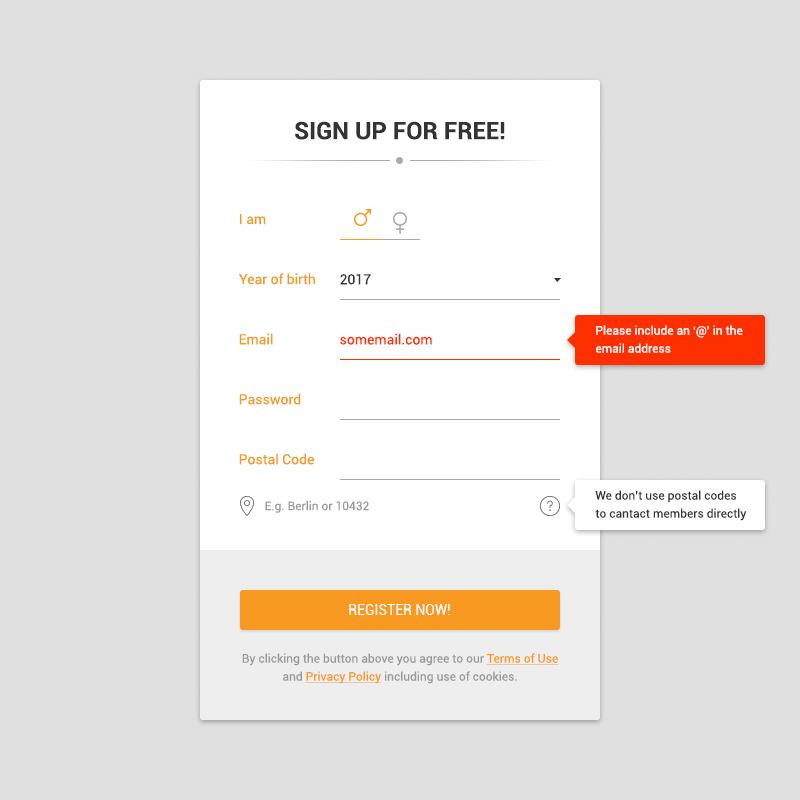
<style>
.page{position:relative;width:800px;height:800px;background:#e0e0e0}
.page>*{position:absolute;margin:0}
.t1{font:24px "Roboto-Bold";color:#333333;text-transform:uppercase}
.t2{font:14.1px "Roboto-Regular";color:#f89921}
.t3{font:14px "Roboto-Regular";color:#f89921}
.t4{font:14px "Roboto-Regular";color:#333333}
.t5{font:12px/18px "Roboto-Regular";color:#ffffff}
.t6{font:13.9px "Roboto-Regular";color:#f89921}
.t7{font:13.9px "Roboto-Regular";color:#ff3000}
.t8{font:12px/18px "Roboto-Regular";color:#333333}
.t9{font:12px "Roboto-Regular";color:#999999}
.t10{font:14px "Roboto-Regular";color:#ffffff;text-transform:uppercase}
.t11{font:12px/18px "Roboto-Regular";color:#999999}
.t12{font:12px/18px "Roboto-Regular";color:#f89921;text-decoration:underline}
</style>
<div class="page">
<p class="t1" style="left:295px;top:121px;width:210px;height:19px">Sign up for FREE!</p>
<p class="t2" style="left:240px;top:214px;width:26px;height:11px">I am</p>
<p class="t3" style="left:239px;top:273px;width:76px;height:12px">Year of birth</p>
<p class="t4" style="left:340px;top:274px;width:31px;height:11px">2017</p>
<p class="t5" style="left:596px;top:325px;width:147px;height:28px">Please include an ‘@’ in the<br>email address</p>
<p class="t6" style="left:239px;top:333px;width:34px;height:12px">Email</p>
<p class="t7" style="left:340px;top:333px;width:92px;height:12px">somemail.com</p>
<p class="t6" style="left:239px;top:393px;width:62px;height:12px">Password</p>
<p class="t6" style="left:239px;top:453px;width:75px;height:12px">Postal Code</p>
<p class="t8" style="left:595px;top:490px;width:152px;height:31px">We don’t use postal codes<br>to cantact members directly</p>
<p class="t9" style="left:265px;top:500px;width:104px;height:13px">E.g. Berlin or 10432</p>
<p class="t10" style="left:349px;top:604px;width:101px;height:11px">REGISTER NOW!</p>
<p class="t11" style="left:242px;top:653px;width:317px;height:31px;text-align:center">By clicking the button above you agree to our <span class="t12">Terms of Use<br></span>and <span class="t12">Privacy Policy </span>including use of cookies.</p>
</div>
